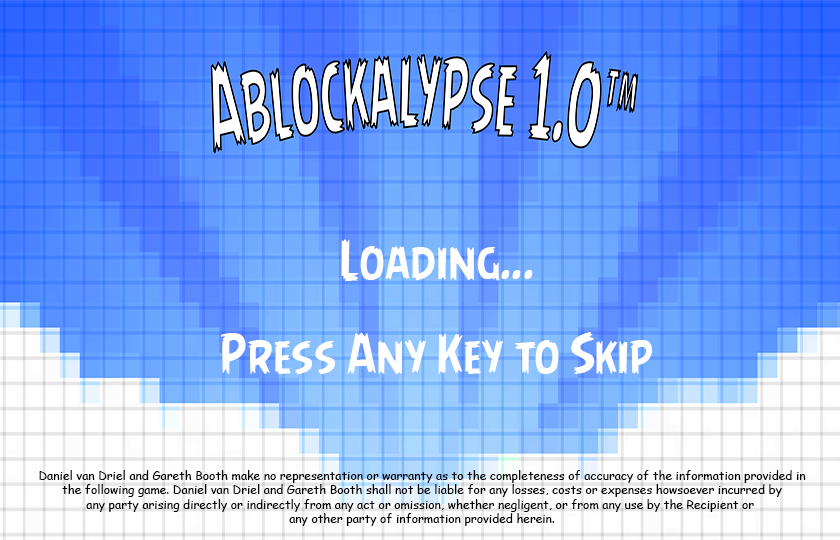
<style>
.page{position:relative;width:840px;height:540px}
.page>*{position:absolute;margin:0}
.t1{font:12px "ComicSansMS";color:#000000}
</style>
<div class="page">
<p class="t1" style="left:39px;top:470px;width:767px;height:56px;text-align:center">Daniel van Driel and Gareth Booth make no representation or warranty as to the completeness of accuracy of the information provided in<br>the following game. Daniel van Driel and Gareth Booth shall not be liable for any losses, costs or expenses howsoever incurred by<br>any party arising directly or indirectly from any act or omission, whether negligent, or from any use by the Recipient or <br>any other party of information provided herein.</p>
</div>
